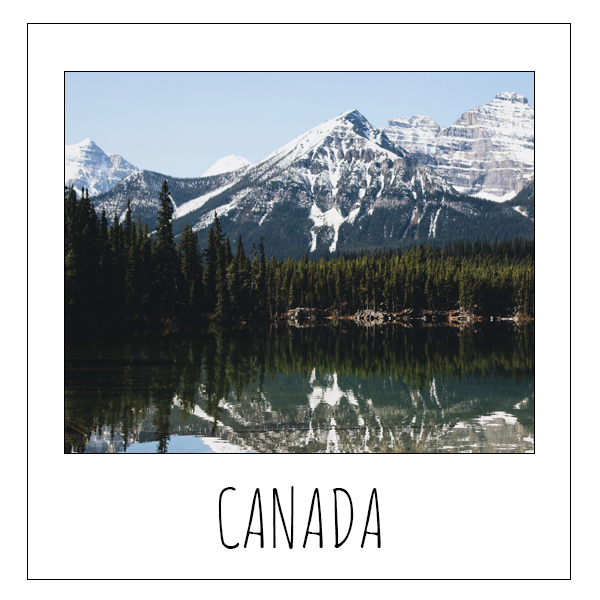
<style>
.page{position:relative;width:600px;height:600px;background:#ffffff}
.page>*{position:absolute;margin:0}
.t1{font:80px "AmaticSC-Regular";color:#040404}
</style>
<div class="page">
<p class="t1" style="left:218px;top:486px;width:163px;height:63px">CANADA</p>
</div>
